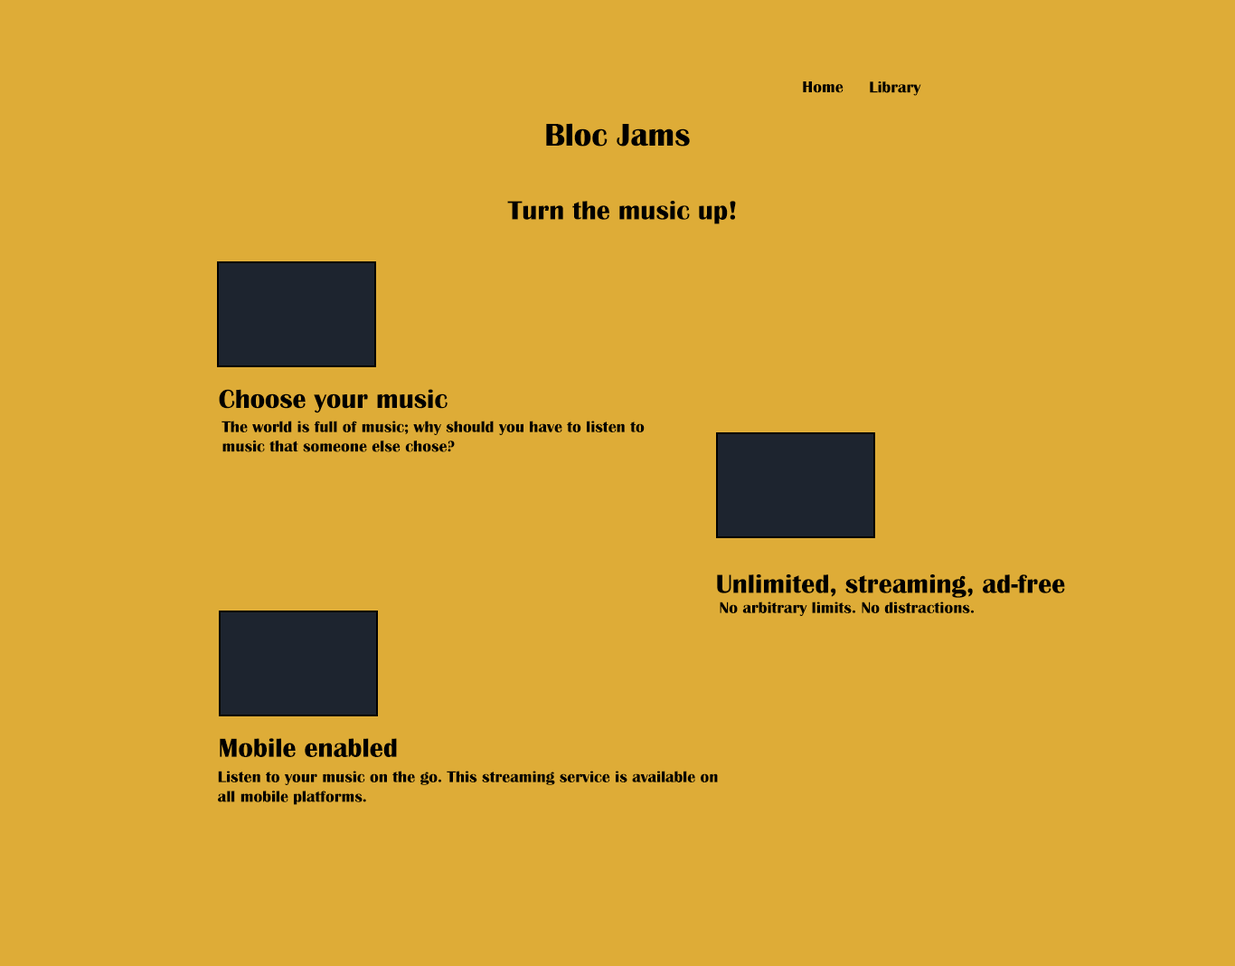
<style>
.page{position:relative;width:1235px;height:966px;background:#deac37}
.page>*{position:absolute;margin:0}
.t1{font:16.3px "BritannicBold";color:#000000}
.t2{font:32.5px "BritannicBold";color:#000000}
.t3{font:27.1px "BritannicBold";color:#000000}
</style>
<div class="page">
<p class="t1" style="left:803px;top:81px;width:41px;height:12px">Home</p>
<p class="t1" style="left:870px;top:81px;width:51px;height:15px">Library</p>
<p class="t2" style="left:546px;top:123px;width:144px;height:23px">Bloc Jams</p>
<p class="t3" style="left:507px;top:201px;width:229px;height:23px">Turn the music up!</p>
<p class="t3" style="left:219px;top:389px;width:229px;height:24px">Choose your music</p>
<p class="t1" style="left:221px;top:420px;width:424px;height:32px">The world is full of music; why should you have to listen to music that someone else chose?</p>
<p class="t3" style="left:717px;top:574px;width:348px;height:24px">Unlimited, streaming, ad-free</p>
<p class="t1" style="left:720px;top:601px;width:254px;height:15px">No arbitrary limits. No distractions.</p>
<p class="t3" style="left:220px;top:738px;width:177px;height:19px">Mobile enabled</p>
<p class="t1" style="left:218px;top:770px;width:500px;height:35px">Listen to your music on the go. This streaming service is available on all mobile platforms.</p>
</div>
